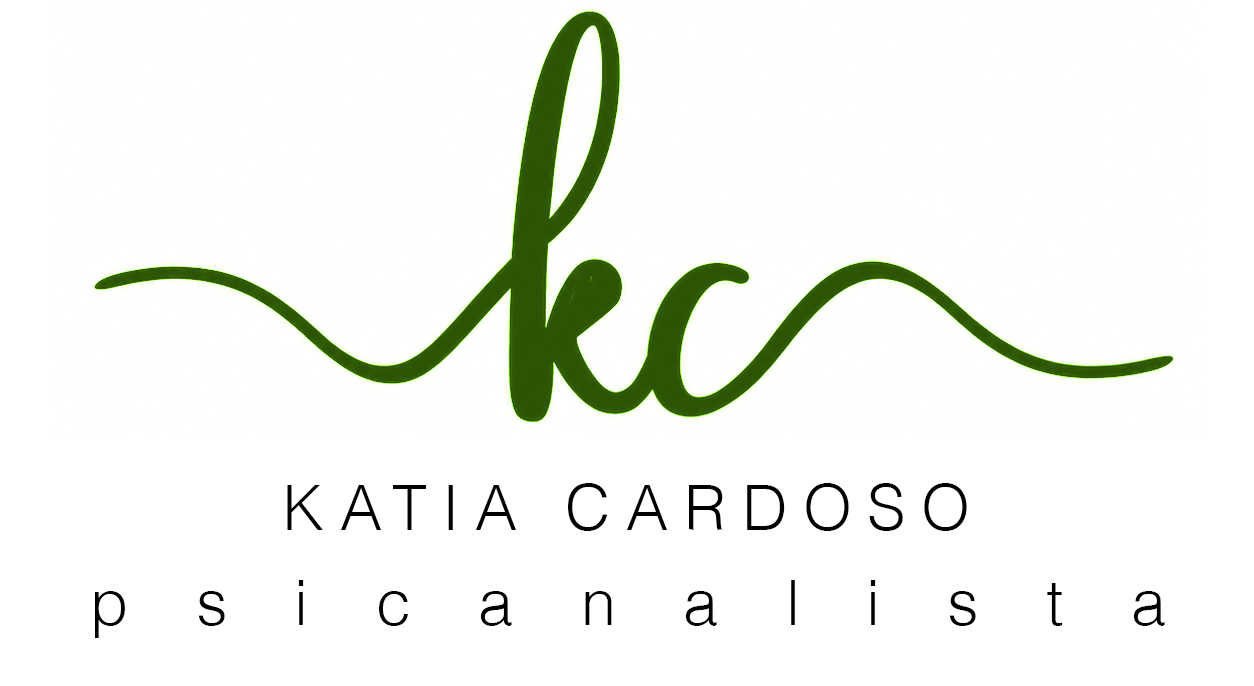
<style>
.page{position:relative;width:1254px;height:686px;background:#ffffff}
.page>*{position:absolute;margin:0}
.t1{font:63.4px "Helvetica-Light";letter-spacing:0.24em;color:#010100}
.t2{font:63.4px "Helvetica-Light";letter-spacing:1.06em;color:#010100}
</style>
<div class="page">
<p class="t1" style="left:287px;top:483px;width:680px;height:48px">KATIA CARDOSO</p>
<p class="t2" style="left:95px;top:580px;width:1070px;height:58px">psicanalista</p>
</div>
